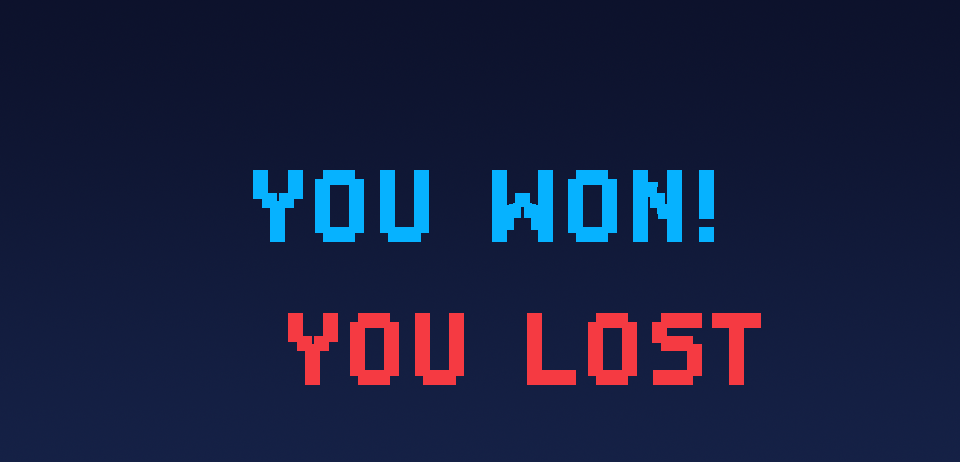
<style>
.page{position:relative;width:960px;height:462px}
.page>*{position:absolute;margin:0}
.t1{font:134.8px "DisposableDroidBB-Bold";color:#06b2ff}
.t2{font:134.8px "DisposableDroidBB-Bold";color:#f53a42}
</style>
<div class="page">
<p class="t1" style="left:253px;top:170px;width:461px;height:72px">YOU WON!</p>
<p class="t2" style="left:288px;top:313px;width:473px;height:72px">YOU LOST</p>
</div>
